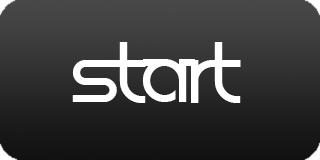
<style>
.page{position:relative;width:320px;height:160px}
.page>*{position:absolute;margin:0}
.t1{font:72px "Prognostic";color:#ffffff}
</style>
<div class="page">
<p class="t1" style="left:72px;top:42px;width:169px;height:61px">Start</p>
</div>
